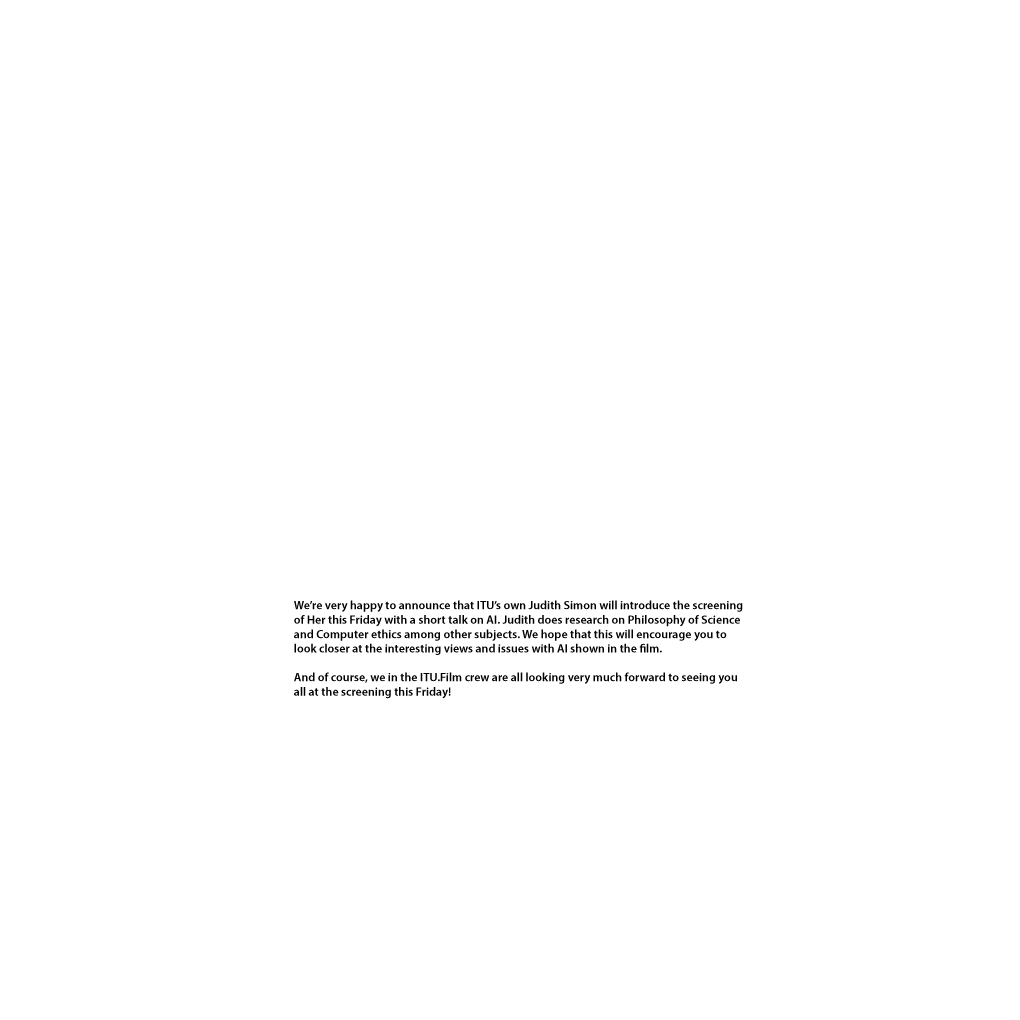
<style>
.page{position:relative;width:1020px;height:1020px;background:#ffffff}
.page>*{position:absolute;margin:0}
.t1{font:12px "MyriadPro-Semibold";color:#000000}
</style>
<div class="page">
<p class="t1" style="left:294px;top:600px;width:449px;height:99px">We’re very happy to announce that ITU’s own Judith Simon will introduce the screening of Her this Friday with a short talk on AI. Judith does research on Philosophy of Science and Computer ethics among other subjects. We hope that this will encourage you to look closer at the interesting views and issues with AI shown in the film.<br><br>And of course, we in the ITU.Film crew are all looking very much forward to seeing you all at the screening this Friday!</p>
</div>
